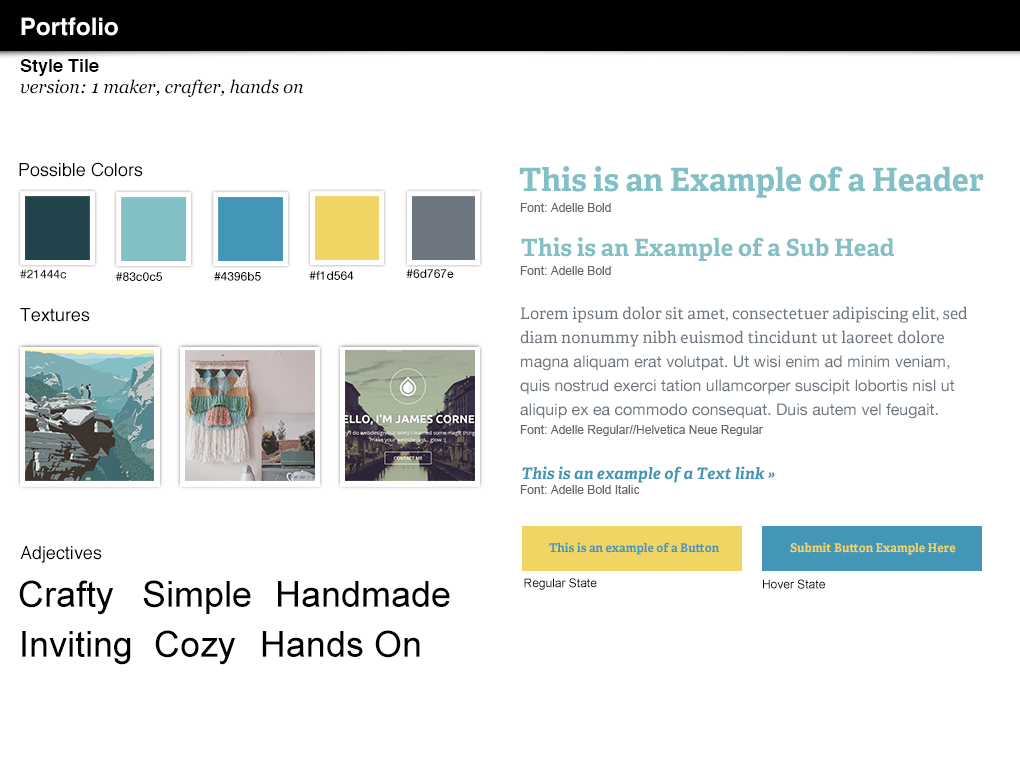
<style>
.page{position:relative;width:1020px;height:760px;background:#ffffff}
.page>*{position:absolute;margin:0}
.t1{font:24px "Helvetica-Bold";color:#ffffff}
.t2{font:18px "Helvetica-Bold";color:#000000}
.t3{font:18px "Georgia-Italic";color:#000000}
.t4{font:18px "Helvetica";color:#000000}
.t5{font:32px "Adelle-Bold";color:#83c0c5}
.t6{font:12px "ArialMT";color:#666666}
.t7{font:24px "Adelle-Bold";color:#83c0c5}
.t8{font:12px "HelveticaNeue-Medium";color:#282828}
.t9{font:12px "HelveticaNeue-Medium";color:#000000}
.t10{font:16px/24px "HelveticaNeue";color:#6d767e}
.t11{font:16px/24px "Adelle-Regular";color:#6d767e}
.t12{font:16px "Adelle-BoldItalic";color:#4396b5}
.t13{font:12px "Adelle-Bold";color:#4396b5}
.t14{font:12px "Adelle-Bold";color:#f1d564}
.t15{font:36px "ArialMT";color:#000000}
.t16{font:12px "ArialMT";color:#000000}
</style>
<div class="page">
<p class="t1" style="left:21px;top:17px;width:97px;height:19px">Portfolio</p>
<p class="t2" style="left:20px;top:59px;width:79px;height:17px">Style Tile</p>
<p class="t3" style="left:20px;top:79px;width:283px;height:18px">version: 1 maker, crafter, hands on</p>
<p class="t4" style="left:19px;top:162px;width:124px;height:15px">Possible Colors</p>
<p class="t5" style="left:519px;top:166px;width:465px;height:32px">This is an Example of a Header</p>
<p class="t6" style="left:520px;top:203px;width:91px;height:9px">Font: Adelle Bold</p>
<p class="t7" style="left:521px;top:237px;width:373px;height:24px">This is an Example of a Sub Head</p>
<p class="t8" style="left:20px;top:269px;width:47px;height:10px">#21444c</p>
<p class="t9" style="left:406px;top:269px;width:48px;height:9px">#6d767e</p>
<p class="t6" style="left:520px;top:266px;width:91px;height:9px">Font: Adelle Bold</p>
<p class="t9" style="left:116px;top:272px;width:46px;height:9px">#83c0c5</p>
<p class="t9" style="left:214px;top:272px;width:47px;height:9px">#4396b5</p>
<p class="t9" style="left:309px;top:271px;width:45px;height:9px">#f1d564</p>
<p class="t4" style="left:20px;top:308px;width:70px;height:14px">Textures</p>
<p class="t10" style="left:520px;top:306px;width:447px;height:113px"><span class="t11">Lorem ipsum dolor sit amet, consectetuer adipiscing elit, sed diam nonummy nibh euismod tincidunt ut laoreet dolore </span>magna aliquam erat volutpat. Ut wisi enim ad minim veniam, quis nostrud exerci tation ullamcorper suscipit lobortis nisl ut aliquip ex ea commodo consequat. Duis autem vel feugait.</p>
<p class="t6" style="left:520px;top:425px;width:243px;height:11px">Font: Adelle Regular//Helvetica Neue Regular</p>
<p class="t12" style="left:522px;top:466px;width:253px;height:17px">This is an example of a Text link »</p>
<p class="t6" style="left:520px;top:485px;width:120px;height:9px">Font: Adelle Bold Italic</p>
<p class="t13" style="left:549px;top:542px;width:170px;height:13px">This is an example of a Button</p>
<p class="t14" style="left:790px;top:542px;width:166px;height:13px">Submit Button Example Here</p>
<p class="t4" style="left:20px;top:546px;width:82px;height:17px">Adjectives</p>
<p class="t15" style="left:19px;top:580px;width:95px;height:35px">Crafty</p>
<p class="t15" style="left:143px;top:580px;width:108px;height:34px">Simple</p>
<p class="t15" style="left:278px;top:581px;width:172px;height:26px">Handmade</p>
<p class="t16" style="left:524px;top:578px;width:73px;height:12px">Regular State</p>
<p class="t16" style="left:763px;top:579px;width:62px;height:10px">Hover State</p>
<p class="t15" style="left:155px;top:630px;width:81px;height:35px">Cozy</p>
<p class="t15" style="left:262px;top:630px;width:158px;height:28px">Hands On</p>
<p class="t15" style="left:22px;top:631px;width:109px;height:34px">Inviting</p>
</div>
